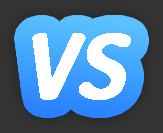
<style>
.page{position:relative;width:163px;height:133px;background:#333333}
.page>*{position:absolute;margin:0}
.t1{font:90px "Dosis-Bold";color:#ffffff;font-weight:bold;font-style:italic}
</style>
<div class="page">
<p class="t1" style="left:32px;top:33px;width:99px;height:67px">VS</p>
</div>
